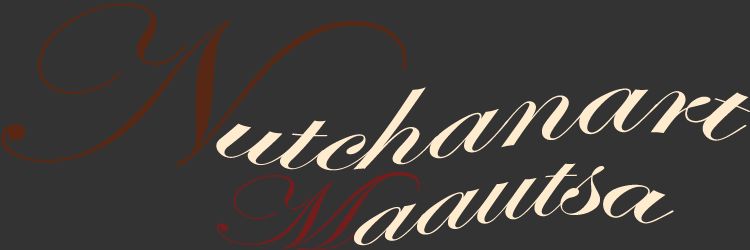
<style>
.page{position:relative;width:750px;height:250px;background:#333333}
.page>*{position:absolute;margin:0}
.t1{font:144.1px "EdwardianScriptITC";color:#ffebcd;scale:1.41 1}
.t2{font:129.7px "EdwardianScriptITC";color:#ffebcd;scale:1.41 1}
.t3{font:101.4px "EdwardianScriptITC";color:#731d1d;scale:1.41 1}
</style>
<div class="page">
<p class="t1" style="left:216px;top:87px;width:534px;height:84px">utchanart</p>
<p class="t2" style="left:216px;top:163px;width:458px;height:88px"><span class="t3">M</span>aautsa</p>
</div>
